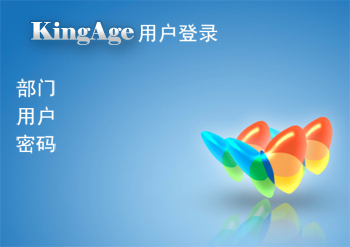
<style>
.page{position:relative;width:350px;height:247px}
.page>*{position:absolute;margin:0}
.t1{font:23.6px "Elephant-Regular"}
.t2{font:19.7px "SimHei";color:#fdfdfd}
</style>
<div class="page">
<p class="t1" style="left:31px;top:21px;width:103px;height:24px">KingAge</p>
<p class="t2" style="left:138px;top:23px;width:80px;height:20px">用户登录</p>
<p class="t2" style="left:16px;top:78px;width:39px;height:20px">部门</p>
<p class="t2" style="left:16px;top:106px;width:38px;height:20px">用户</p>
<p class="t2" style="left:16px;top:134px;width:40px;height:20px">密码</p>
</div>
